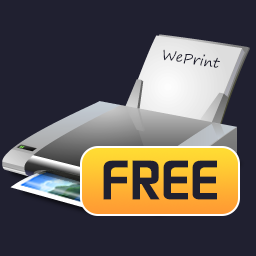
<style>
.page{position:relative;width:256px;height:256px;background:#202030}
.page>*{position:absolute;margin:0}
.t1{font:14px "SegoePrint";color:#202030}
.t2{font:48px "FZHZGBJW--GB1-0";color:#202030}
</style>
<div class="page">
<p class="t1" style="left:163px;top:49px;width:57px;height:19px;rotate:9deg">WePrint</p>
<p class="t2" style="left:103px;top:160px;width:114px;height:40px">FREE</p>
</div>
